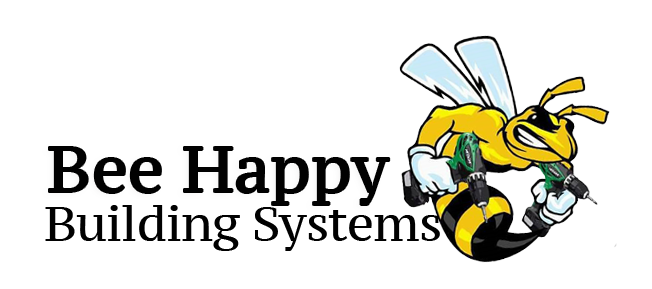
<style>
.page{position:relative;width:652px;height:289px;background:#ffffff}
.page>*{position:absolute;margin:0}
.t1{font:64px "PTSerif-Caption";color:#010101}
.t2{font:48px "PTSerif-Caption";letter-spacing:-0.02em;color:#010101}
</style>
<div class="page">
<p class="t1" style="left:49px;top:147px;width:341px;height:58px">Bee Happy</p>
<p class="t2" style="left:45px;top:205px;width:395px;height:46px">Building Systems</p>
</div>
